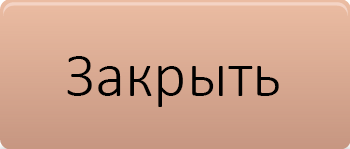
<style>
.page{position:relative;width:350px;height:149px}
.page>*{position:absolute;margin:0}
.t1{font:64px "Calibri-Light";color:#000000}
</style>
<div class="page">
<p class="t1" style="left:67px;top:56px;width:212px;height:51px">Закрыть</p>
</div>
